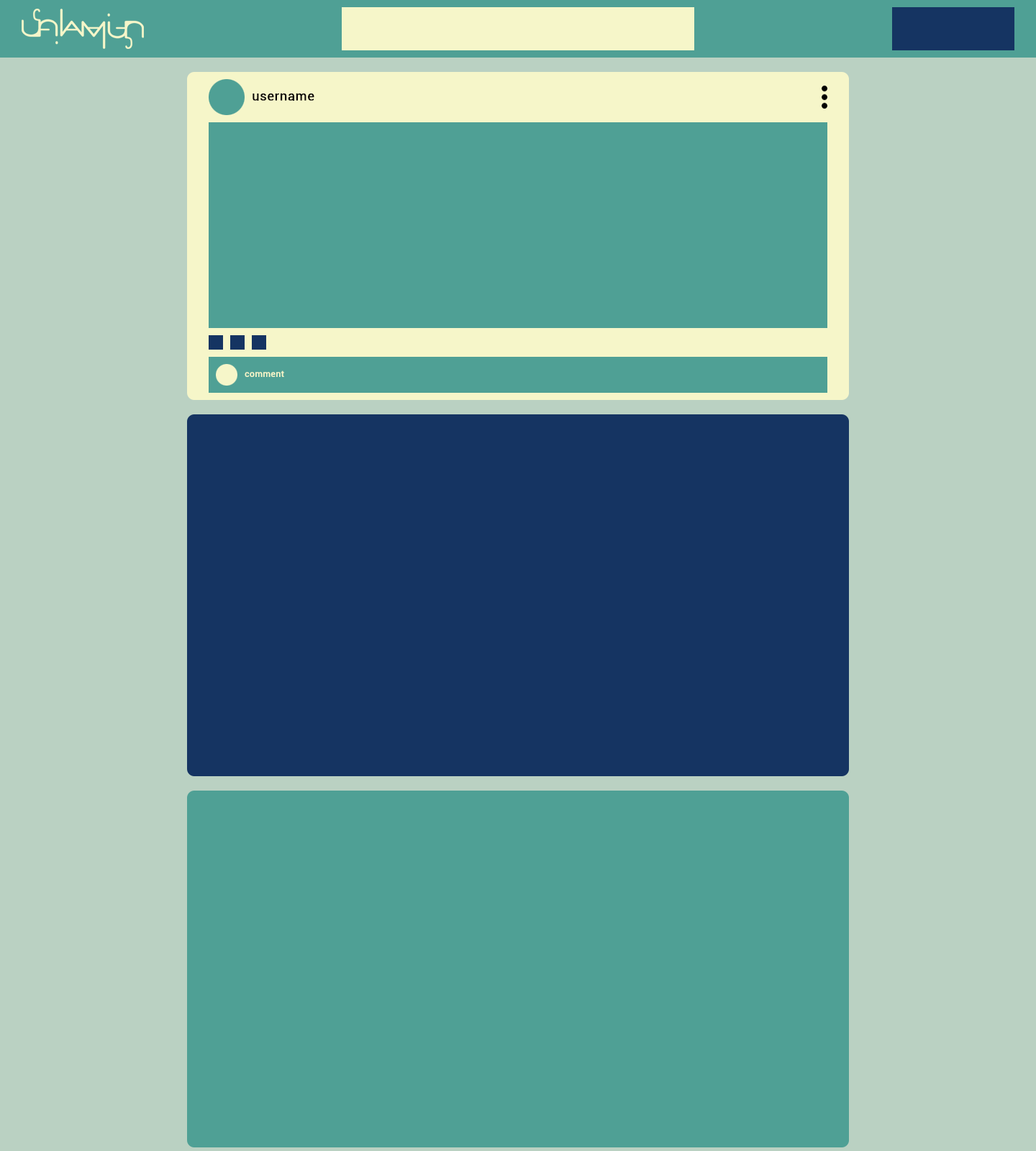
<style>
.page{position:relative;width:1036px;height:1151px;background:#bad1c2}
.page>*{position:absolute;margin:0}
.t1{font:12.9px "Roboto-Regular";letter-spacing:0.02em;color:#080202;font-weight:bold}
.t2{font:8.6px "Roboto-Regular";letter-spacing:0.02em;color:#f6f6c9;font-weight:bold}
</style>
<div class="page">
<p class="t1" style="left:253px;top:93px;width:61px;height:8px">username</p>
<p class="t2" style="left:245px;top:370px;width:39px;height:7px">comment</p>
</div>
